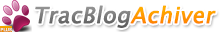
<style>
.page{position:relative;width:224px;height:32px;background:#ffffff}
.page>*{position:absolute;margin:0}
.t1{font:22px "LucidaSansUnicode";color:#777777;font-weight:bold;font-style:italic}
.t2{font:22px "LucidaSansUnicode";color:#ff9600;font-weight:bold;font-style:italic}
</style>
<div class="page">
<p class="t1" style="left:35px;top:5px;width:181px;height:23px">TracBlog<span class="t2">Achiver</span></p>
</div>
